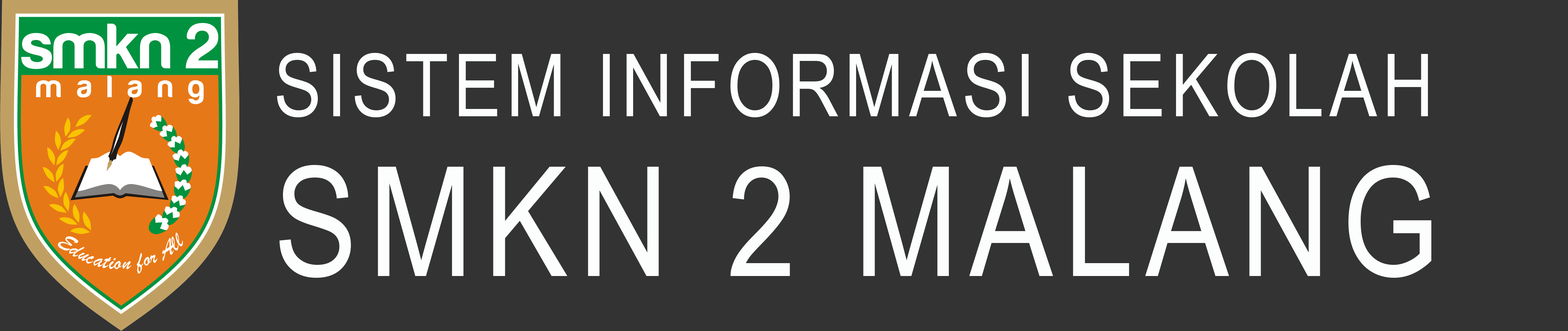
<style>
.page{position:relative;width:1568px;height:331px;background:#333333}
.page>*{position:absolute;margin:0}
.t1{font:87.1px/159.7px "ArialNarrow";letter-spacing:0.06em;color:#fcfefe}
.t2{font:152.4px/159.7px "ArialNarrow";letter-spacing:0.075em;color:#fcfefe}
</style>
<div class="page">
<p class="t1" style="left:277px;top:53px;width:1154px;height:225px">SISTEM INFORMASI SEKOLAH<br><span class="t2">SMKN 2 MALANG</span></p>
</div>
